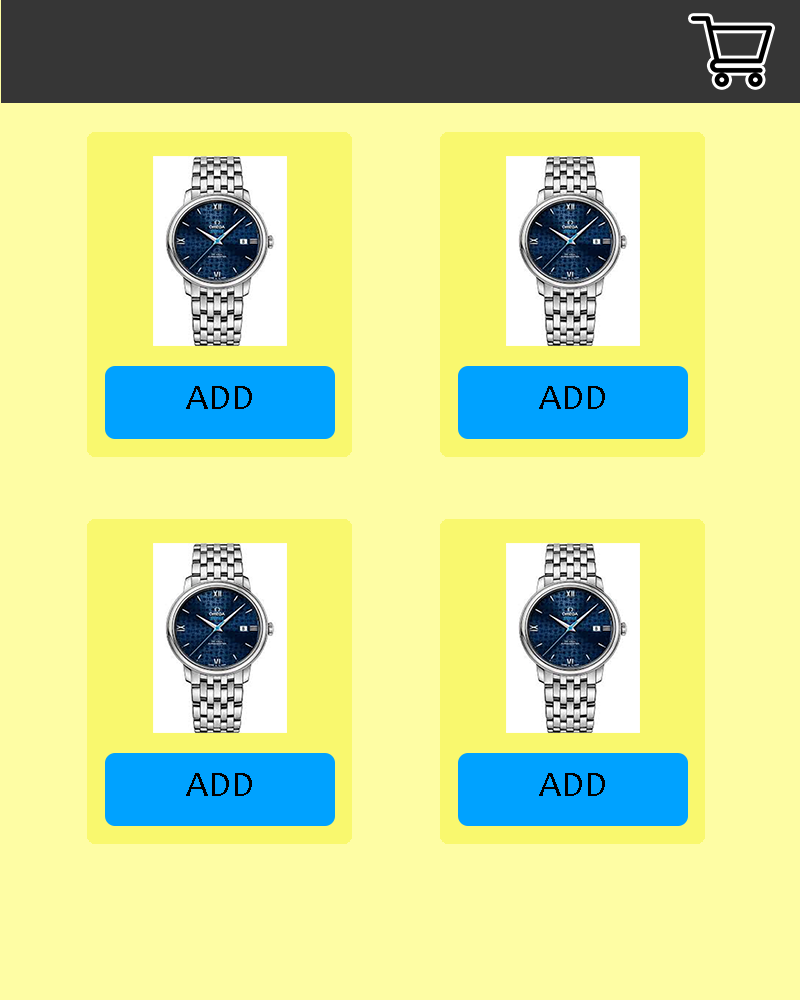
<style>
.page{position:relative;width:800px;height:1000px;background:#fefda4}
.page>*{position:absolute;margin:0}
.t1{font:36px "Candara";color:#000000}
</style>
<div class="page">
<p class="t1" style="left:186px;top:386px;width:66px;height:23px">ADD</p>
<p class="t1" style="left:539px;top:386px;width:66px;height:23px">ADD</p>
<p class="t1" style="left:186px;top:773px;width:66px;height:23px">ADD</p>
<p class="t1" style="left:539px;top:773px;width:66px;height:23px">ADD</p>
</div>
